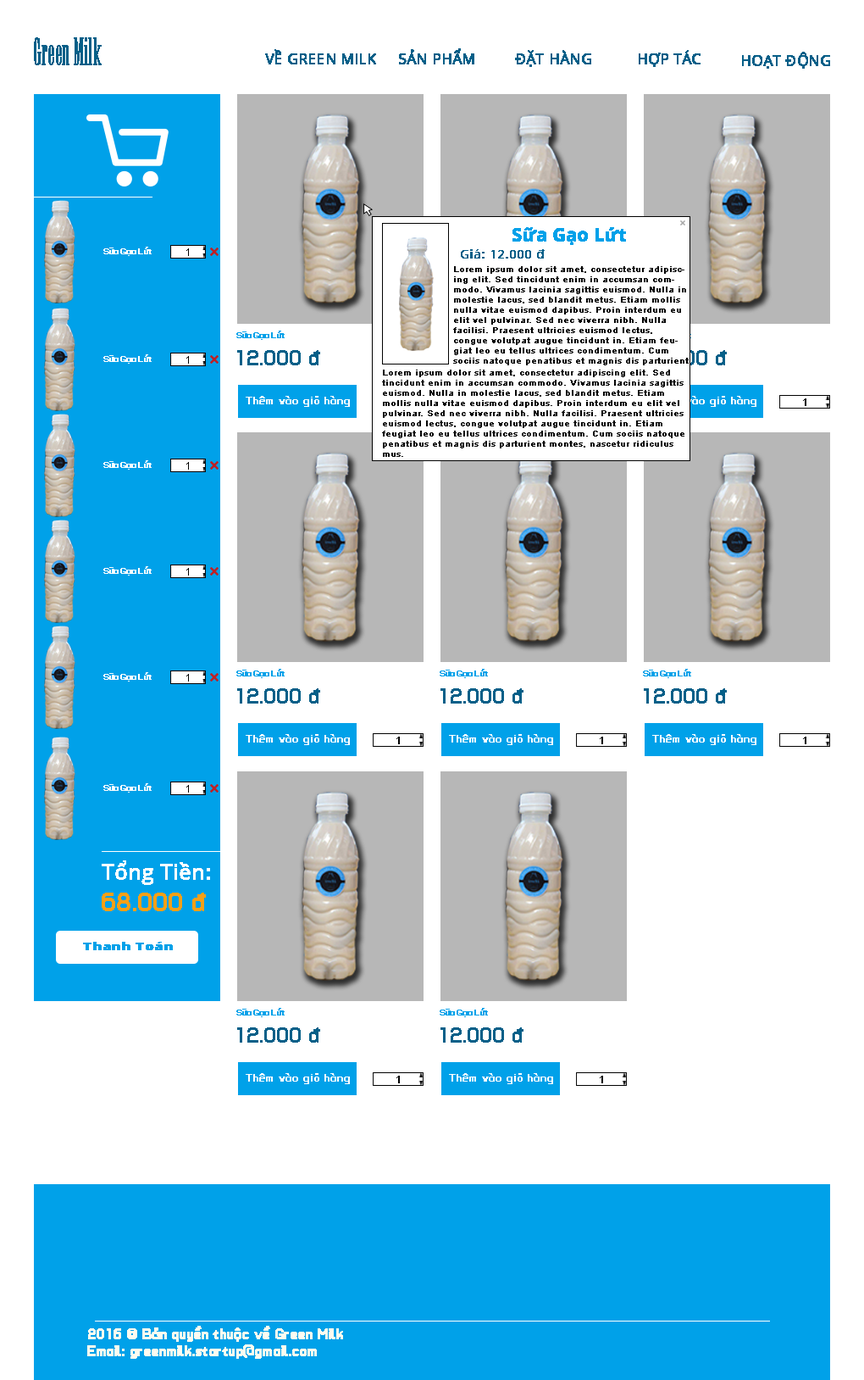
<style>
.page{position:relative;width:864px;height:1380px;background:#ffffff}
.page>*{position:absolute;margin:0}
.t1{font:36.1px "Onyx";color:#045f88;font-weight:bold;scale:0.67 1}
.t2{font:14.5px "OpenSans";color:#045f88;font-weight:bold}
.t3{font:17.8px "OpenSans-Bold";color:#00a1e9;font-weight:bold}
.t4{font:8.7px "TUVTypomoderno";color:#ffffff;font-weight:bold}
.t5{font:10.2px "OpenSans";color:#000000;scale:0.91 1}
.t6{font:11.9px "OpenSans";color:#045f88;font-weight:bold}
.t7{font:8.5px "ArialMT";color:#030303;font-weight:bold}
.t8{font:8.7px "TUVTypomoderno";color:#00a1e9;font-weight:bold}
.t9{font:20.9px "TUVTypomoderno";color:#045f88;font-weight:bold}
.t10{font:20.9px "TUVTypomoderno";font-weight:bold}
.t11{font:11px "TUVTypomoderno";color:#ffffff;font-weight:bold}
.t12{font:10.2px "OpenSans";color:#000000;scale:1.3 1}
.t13{font:20.9px "OpenSans";color:#ffffff;font-weight:bold}
.t14{font:25.4px "TUVTypomoderno";color:#f6a018;font-weight:bold}
.t15{font:11px "OpenSans-Extrabold";color:#00a1e9;font-weight:bold;scale:1.2 1}
.t16{font:14.5px "TUVTypomoderno";color:#fffbf0;font-weight:bold}
</style>
<div class="page">
<p class="t1" style="left:34px;top:37px;width:68px;height:28px">Green Milk</p>
<p class="t2" style="left:265px;top:49px;width:111px;height:15px">VỀ GREEN MILK</p>
<p class="t2" style="left:399px;top:48px;width:76px;height:16px">SẢN PHẨM</p>
<p class="t2" style="left:515px;top:50px;width:76px;height:17px">ĐẶT HÀNG</p>
<p class="t2" style="left:639px;top:50px;width:62px;height:17px">HỢP TÁC</p>
<p class="t2" style="left:742px;top:52px;width:88px;height:17px">HOẠT ĐỘNG</p>
<p class="t3" style="left:513px;top:227px;width:113px;height:18px">Sữa Gạo Lứt</p>
<p class="t4" style="left:103px;top:247px;width:49px;height:9px">Sữa Gạo Lứt</p>
<p class="t5" style="left:186px;top:248px;width:3px;height:8px">1</p>
<p class="t6" style="left:461px;top:249px;width:84px;height:9px">Giá: 12.000 đ</p>
<p class="t7" style="left:453px;top:266px;width:236px;height:99px">Lorem ipsum dolor sit amet, consectetur adipiscing elit. Sed tincidunt enim in accumsan commodo. Vivamus lacinia sagittis euismod. Nulla in molestie lacus, sed blandit metus. Etiam mollis nulla vitae euismod dapibus. Proin interdum eu elit vel pulvinar. Sed nec viverra nibh. Nulla facilisi. Praesent ultricies euismod lectus, congue volutpat augue tincidunt in. Etiam feugiat leo eu tellus ultrices condimentum. Cum sociis natoque penatibus et magnis dis parturient montes, nascetur ridiculus mus.</p>
<p class="t8" style="left:236px;top:330px;width:49px;height:10px">Sữa Gạo Lứt</p>
<p class="t9" style="left:237px;top:350px;width:83px;height:15px">12.000 đ</p>
<p class="t10" style="left:644px;top:350px;width:83px;height:15px">12.000 đ</p>
<p class="t4" style="left:103px;top:354px;width:49px;height:10px">Sữa Gạo Lứt</p>
<p class="t5" style="left:186px;top:356px;width:3px;height:8px">1</p>
<p class="t7" style="left:382px;top:369px;width:303px;height:88px">Lorem ipsum dolor sit amet, consectetur adipiscing elit. Sed tincidunt enim in accumsan commodo. Vivamus lacinia sagittis euismod. Nulla in molestie lacus, sed blandit metus. Etiam mollis nulla vitae euismod dapibus. Proin interdum eu elit vel pulvinar. Sed nec viverra nibh. Nulla facilisi. Praesent ultricies euismod lectus, congue volutpat augue tincidunt in. Etiam feugiat leo eu tellus ultrices condimentum. Cum sociis natoque penatibus et magnis dis parturient montes, nascetur ridiculus mus.</p>
<p class="t11" style="left:246px;top:396px;width:104px;height:11px">Thêm vào giỏ hàng</p>
<p class="t11" style="left:652px;top:396px;width:105px;height:11px">Thêm vào giỏ hàng</p>
<p class="t12" style="left:803px;top:398px;width:4px;height:8px">1</p>
<p class="t4" style="left:103px;top:460px;width:49px;height:9px">Sữa Gạo Lứt</p>
<p class="t5" style="left:186px;top:462px;width:3px;height:7px">1</p>
<p class="t4" style="left:103px;top:566px;width:49px;height:9px">Sữa Gạo Lứt</p>
<p class="t5" style="left:186px;top:568px;width:3px;height:7px">1</p>
<p class="t4" style="left:103px;top:672px;width:49px;height:9px">Sữa Gạo Lứt</p>
<p class="t5" style="left:186px;top:674px;width:3px;height:7px">1</p>
<p class="t8" style="left:236px;top:669px;width:49px;height:9px">Sữa Gạo Lứt</p>
<p class="t8" style="left:440px;top:669px;width:48px;height:9px">Sữa Gạo Lứt</p>
<p class="t8" style="left:643px;top:669px;width:48px;height:9px">Sữa Gạo Lứt</p>
<p class="t9" style="left:237px;top:688px;width:83px;height:15px">12.000 đ</p>
<p class="t9" style="left:441px;top:688px;width:83px;height:15px">12.000 đ</p>
<p class="t9" style="left:644px;top:688px;width:83px;height:15px">12.000 đ</p>
<p class="t11" style="left:246px;top:734px;width:104px;height:11px">Thêm vào giỏ hàng</p>
<p class="t12" style="left:397px;top:736px;width:3px;height:8px">1</p>
<p class="t11" style="left:449px;top:734px;width:104px;height:11px">Thêm vào giỏ hàng</p>
<p class="t12" style="left:600px;top:736px;width:3px;height:8px">1</p>
<p class="t11" style="left:652px;top:734px;width:105px;height:11px">Thêm vào giỏ hàng</p>
<p class="t12" style="left:803px;top:736px;width:4px;height:8px">1</p>
<p class="t4" style="left:103px;top:783px;width:49px;height:9px">Sữa Gạo Lứt</p>
<p class="t5" style="left:186px;top:785px;width:3px;height:7px">1</p>
<p class="t13" style="left:102px;top:860px;width:108px;height:25px">Tổng Tiền:</p>
<p class="t14" style="left:102px;top:892px;width:104px;height:19px">68.000 đ</p>
<p class="t15" style="left:83px;top:941px;width:90px;height:9px">Thanh Toán</p>
<p class="t8" style="left:236px;top:1008px;width:49px;height:9px">Sữa Gạo Lứt</p>
<p class="t8" style="left:440px;top:1008px;width:48px;height:9px">Sữa Gạo Lứt</p>
<p class="t9" style="left:237px;top:1027px;width:83px;height:15px">12.000 đ</p>
<p class="t9" style="left:441px;top:1027px;width:83px;height:15px">12.000 đ</p>
<p class="t11" style="left:246px;top:1073px;width:104px;height:11px">Thêm vào giỏ hàng</p>
<p class="t11" style="left:449px;top:1073px;width:104px;height:11px">Thêm vào giỏ hàng</p>
<p class="t12" style="left:397px;top:1075px;width:3px;height:8px">1</p>
<p class="t12" style="left:600px;top:1075px;width:3px;height:8px">1</p>
<p class="t16" style="left:87px;top:1325px;width:256px;height:33px">2016 © Bản quyền thuộc về Green Milk<br>Email: greenmilk.startup@gmail.com</p>
</div>
